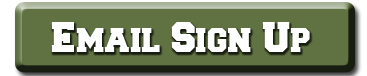
<style>
.page{position:relative;width:367px;height:76px;background:#607242}
.page>*{position:absolute;margin:0}
.t1{font:36px "Freshman";color:#ffffff}
</style>
<div class="page">
<p class="t1" style="left:51px;top:22px;width:259px;height:30px">Email Sign Up</p>
</div>
